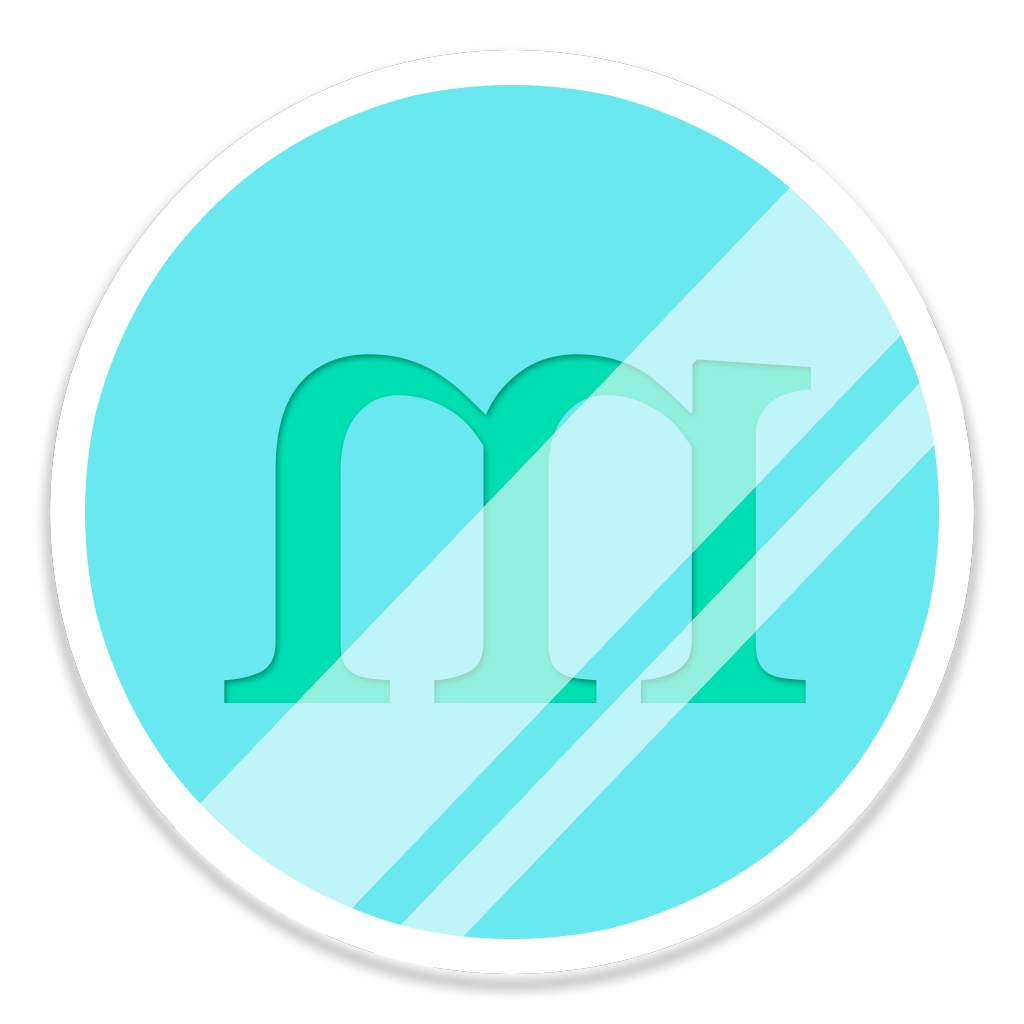
<style>
.page{position:relative;width:1024px;height:1024px;background:#ffffff}
.page>*{position:absolute;margin:0}
.t1{font:705.3px "Georgia"}
</style>
<div class="page">
<p class="t1" style="left:224px;top:354px;width:587px;height:349px;rotate:180deg">m</p>
</div>
